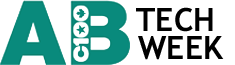
<style>
.page{position:relative;width:235px;height:65px;background:#ffffff}
.page>*{position:absolute;margin:0}
.t1{font:32px/28px "TrebuchetMS-Bold";color:#000000}
</style>
<div class="page">
<p class="t1" style="left:136px;top:7px;width:88px;height:53px;text-align:center">TECH <br>WEEK</p>
</div>
